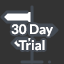
<style>
.page{position:relative;width:64px;height:64px;background:#333333}
.page>*{position:absolute;margin:0}
.t1{font:13.3px "Lato-Bold";color:#ffffff}
</style>
<div class="page">
<p class="t1" style="left:11px;top:24px;width:42px;height:27px;text-align:center">30 Day<br>Trial</p>
</div>
